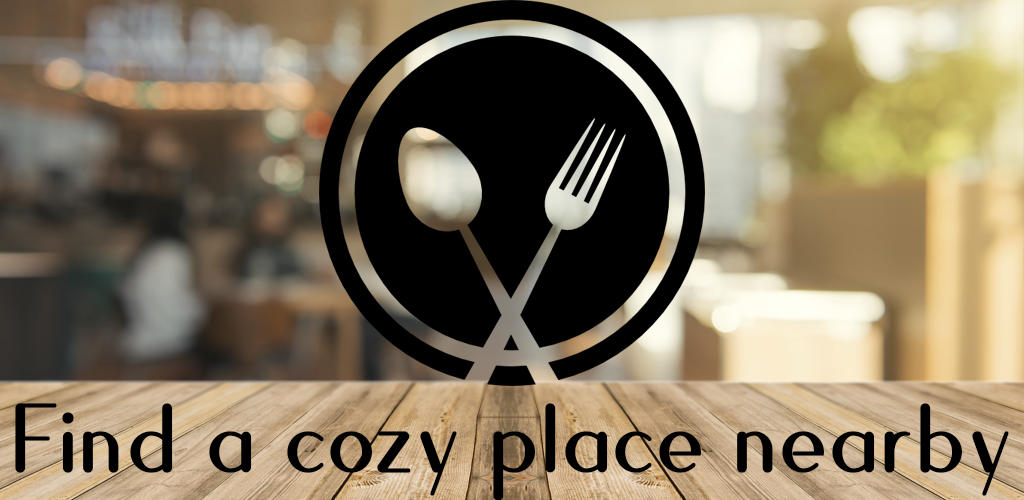
<style>
.page{position:relative;width:1024px;height:500px}
.page>*{position:absolute;margin:0}
.t1{font:31.3px "Quesha";color:#000000;font-weight:bold}
</style>
<div class="page">
<p class="t1" style="left:15px;top:403px;width:994px;height:98px">Find a cozy place nearby</p>
</div>
